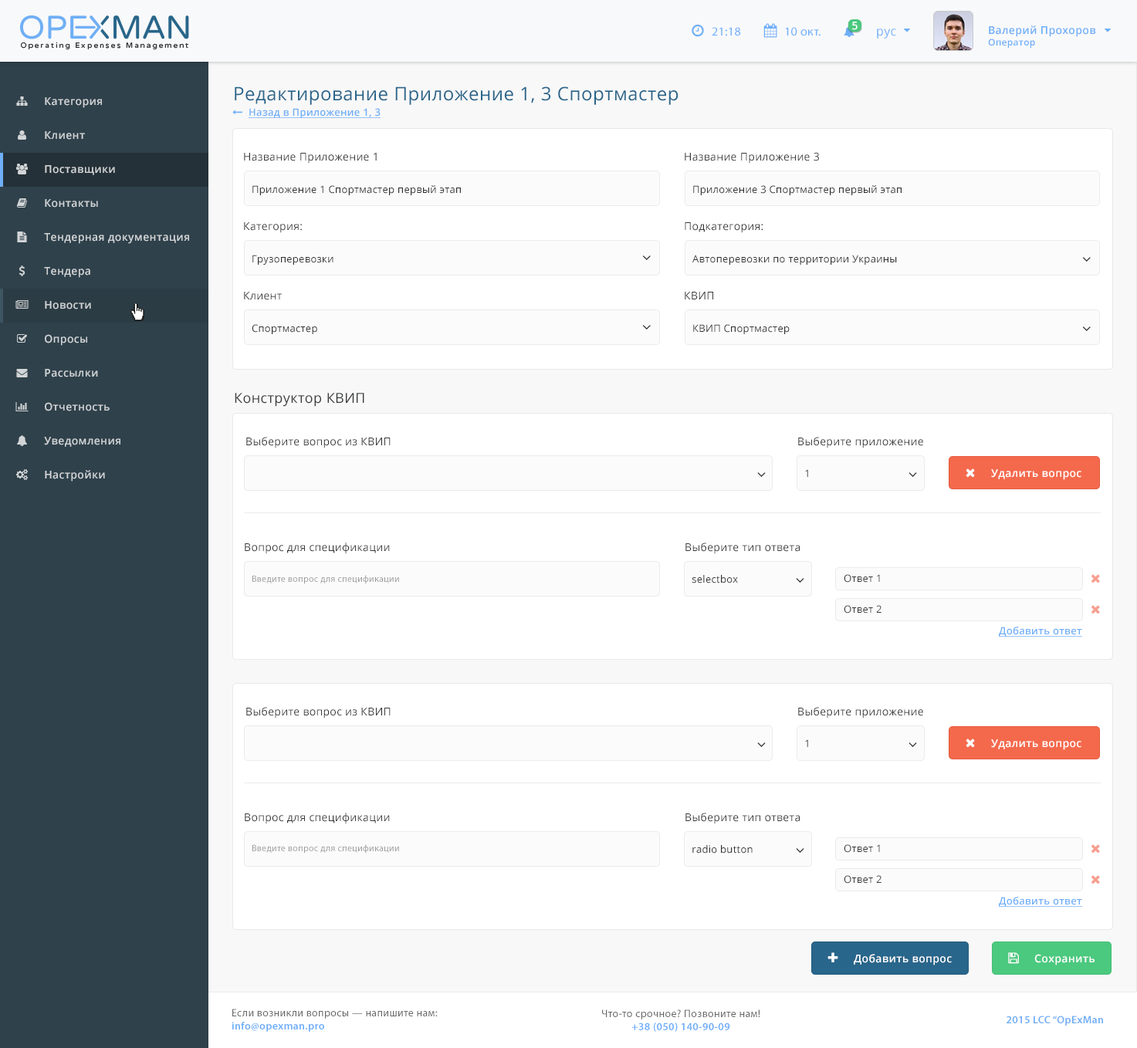
<style>
.page{position:relative;width:1137px;height:1048px;background:#ffffff}
.page>*{position:absolute;margin:0}
.t1{font:12.3px "MyriadPro-Regular";letter-spacing:0.025em;color:#6faff8}
.t2{font:10.8px "OpenSans-Semibold";letter-spacing:0.025em;color:#ffffff}
.t3{font:12.3px "OpenSans";letter-spacing:0.025em;color:#6eaff8}
.t4{font:10.8px "OpenSans-Semibold";letter-spacing:0.025em;color:#6eaef7}
.t5{font:9.2px "OpenSans-Semibold";letter-spacing:0.025em;color:#6eaef7}
.t6{font:18.5px "OpenSans";letter-spacing:0.025em;color:#29658b}
.t7{font:10.8px "OpenSans-Semibold";letter-spacing:0.025em;color:#d2d5d7}
.t8{font:10px "OpenSans-Semibold";letter-spacing:0.025em;color:#6faff8;text-decoration:underline}
.t9{font:10.8px "OpenSans";letter-spacing:0.025em;color:#373838}
.t10{font:10px "OpenSans";letter-spacing:0.025em;color:#333333}
.t11{font:13.8px "OpenSans";letter-spacing:0.025em;color:#373838}
.t12{font:10px "OpenSans";letter-spacing:0.025em}
.t13{font:9.2px "MyriadPro-Regular";letter-spacing:0.025em;color:#999999}
.t14{font:10px "OpenSans";letter-spacing:0.025em;color:#373838}
.t15{font:10.8px "MyriadPro-Regular";letter-spacing:0.025em;color:#696969}
.t16{font:10.8px "MyriadPro-Semibold";letter-spacing:0.025em;color:#6eaef8}
</style>
<div class="page">
<p class="t1" style="left:712px;top:27px;width:29px;height:9px">21:18</p>
<p class="t1" style="left:785px;top:27px;width:36px;height:9px">10 окт.</p>
<p class="t2" style="left:852px;top:22px;width:6px;height:8px">5</p>
<p class="t3" style="left:877px;top:29px;width:19px;height:10px">рус</p>
<p class="t4" style="left:988px;top:25px;width:108px;height:23px">Валерий Прохоров<br><span class="t5">Оператор</span></p>
<p class="t6" style="left:235px;top:86px;width:444px;height:19px">Редактирование Приложение 1, 3 Спортмастер</p>
<p class="t7" style="left:45px;top:97px;width:57px;height:11px">Категория</p>
<p class="t8" style="left:249px;top:108px;width:132px;height:10px">Назад в Приложение 1, 3</p>
<p class="t7" style="left:45px;top:131px;width:40px;height:9px">Клиент</p>
<p class="t9" style="left:244px;top:153px;width:133px;height:11px">Название Приложение 1</p>
<p class="t9" style="left:685px;top:152px;width:134px;height:12px">Название Приложение 3</p>
<p class="t7" style="left:45px;top:165px;width:70px;height:10px">Поставщики</p>
<p class="t10" style="left:252px;top:185px;width:209px;height:10px">Приложение 1 Спортмастер первый этап</p>
<p class="t10" style="left:693px;top:185px;width:209px;height:10px">Приложение 3 Спортмастер первый этап</p>
<p class="t7" style="left:45px;top:199px;width:53px;height:9px">Контакты</p>
<p class="t7" style="left:44px;top:233px;width:145px;height:11px">Тендерная документация</p>
<p class="t9" style="left:244px;top:222px;width:58px;height:11px">Категория:</p>
<p class="t9" style="left:685px;top:222px;width:79px;height:11px">Подкатегория:</p>
<p class="t10" style="left:252px;top:255px;width:82px;height:10px">Грузоперевозки</p>
<p class="t10" style="left:693px;top:255px;width:204px;height:10px">Автоперевозки по территории Украины</p>
<p class="t7" style="left:44px;top:267px;width:46px;height:11px">Тендера</p>
<p class="t9" style="left:244px;top:292px;width:38px;height:8px">Клиент</p>
<p class="t9" style="left:685px;top:292px;width:28px;height:8px">КВИП</p>
<p class="t7" style="left:45px;top:301px;width:46px;height:9px">Новости</p>
<p class="t10" style="left:252px;top:324px;width:65px;height:10px">Спортмастер</p>
<p class="t10" style="left:693px;top:324px;width:97px;height:10px">КВИП Спортмастер</p>
<p class="t7" style="left:45px;top:334px;width:42px;height:12px">Опросы</p>
<p class="t7" style="left:45px;top:369px;width:53px;height:9px">Рассылки</p>
<p class="t11" style="left:235px;top:393px;width:129px;height:14px">Конструктор КВИП</p>
<p class="t7" style="left:45px;top:402px;width:65px;height:10px">Отчетность</p>
<p class="t7" style="left:44px;top:437px;width:76px;height:10px">Уведомления</p>
<p class="t9" style="left:246px;top:437px;width:145px;height:12px">Выберите вопрос из КВИП</p>
<p class="t9" style="left:798px;top:437px;width:125px;height:12px">Выберите приложение</p>
<p class="t7" style="left:45px;top:470px;width:60px;height:12px">Настройки</p>
<p class="t12" style="left:805px;top:469px;width:3px;height:8px">1</p>
<p class="t2" style="left:991px;top:469px;width:91px;height:11px">Удалить вопрос</p>
<p class="t9" style="left:245px;top:543px;width:145px;height:11px">Вопрос для спецификации</p>
<p class="t9" style="left:686px;top:543px;width:114px;height:11px">Выберите тип ответа</p>
<p class="t13" style="left:252px;top:575px;width:147px;height:9px">Введите вопрос для спецификации</p>
<p class="t10" style="left:693px;top:575px;width:45px;height:9px">selectbox</p>
<p class="t14" style="left:844px;top:574px;width:36px;height:9px">Ответ 1</p>
<p class="t14" style="left:844px;top:605px;width:38px;height:9px">Ответ 2</p>
<p class="t8" style="left:999px;top:627px;width:83px;height:10px">Добавить ответ</p>
<p class="t9" style="left:246px;top:707px;width:145px;height:12px">Выберите вопрос из КВИП</p>
<p class="t9" style="left:798px;top:707px;width:125px;height:12px">Выберите приложение</p>
<p class="t12" style="left:805px;top:740px;width:3px;height:7px">1</p>
<p class="t2" style="left:991px;top:740px;width:91px;height:10px">Удалить вопрос</p>
<p class="t9" style="left:245px;top:813px;width:145px;height:12px">Вопрос для спецификации</p>
<p class="t9" style="left:686px;top:813px;width:114px;height:12px">Выберите тип ответа</p>
<p class="t13" style="left:252px;top:845px;width:147px;height:9px">Введите вопрос для спецификации</p>
<p class="t10" style="left:693px;top:845px;width:60px;height:9px">radio button</p>
<p class="t14" style="left:844px;top:845px;width:36px;height:8px">Ответ 1</p>
<p class="t14" style="left:844px;top:876px;width:38px;height:8px">Ответ 2</p>
<p class="t8" style="left:999px;top:897px;width:83px;height:10px">Добавить ответ</p>
<p class="t2" style="left:854px;top:954px;width:98px;height:12px">Добавить вопрос</p>
<p class="t2" style="left:1035px;top:954px;width:60px;height:12px">Сохранить</p>
<p class="t15" style="left:232px;top:1009px;width:206px;height:23px">Если возникли вопросы — напишите нам:<br><span class="t16">info@opexman.pro</span></p>
<p class="t15" style="left:602px;top:1010px;width:159px;height:22px;text-align:center">Что-то срочное? Позвоните нам!<br><span class="t16">+38 (050) 140-90-09</span></p>
<p class="t16" style="left:1007px;top:1016px;width:96px;height:10px">2015 LCC “OpExMan</p>
</div>
